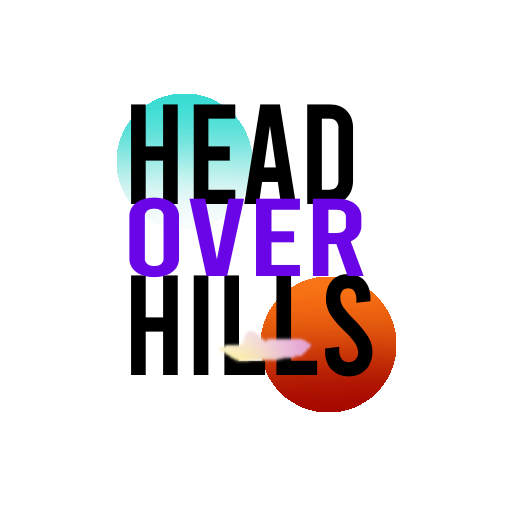
<style>
.page{position:relative;width:514px;height:514px;background:#ffffff}
.page>*{position:absolute;margin:0}
.t1{font:142.2px "Bebas-Regular";color:#000000}
.t2{font:110.4px "Bebas-Regular";color:#6a05e7;scale:1.32 1}
</style>
<div class="page">
<p class="t1" style="left:131px;top:104px;width:242px;height:273px">head<br>hILls</p>
<p class="t2" style="left:129px;top:197px;width:235px;height:81px">Over</p>
</div>
